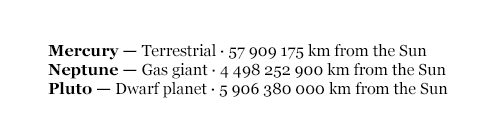
<style>
.page{position:relative;width:500px;height:140px;background:#ffffff}
.page>*{position:absolute;margin:0}
.t1{font:16px "Georgia";color:#000000}
.t2{font:16px "Georgia-Bold";color:#000000}
</style>
<div class="page">
<p class="t1" style="left:48px;top:44px;width:400px;height:54px"><span class="t2">Mercury — </span>Terrestrial · 57 909 175 km from the Sun<br><span class="t2">Neptune — </span>Gas giant · 4 498 252 900 km from the Sun<br><span class="t2">Pluto — </span>Dwarf planet · 5 906 380 000 km from the Sun</p>
</div>
